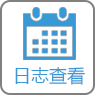
<style>
.page{position:relative;width:95px;height:95px;background:#ffffff}
.page>*{position:absolute;margin:0}
.t1{font:18px "MicrosoftYaHei";color:#3998d6}
</style>
<div class="page">
<p class="t1" style="left:15px;top:67px;width:70px;height:18px">日志查看</p>
</div>
